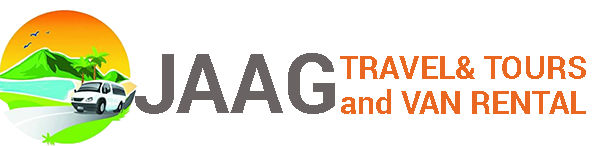
<style>
.page{position:relative;width:600px;height:146px;background:#ffffff}
.page>*{position:absolute;margin:0}
.t1{font:83.3px "Roboto-Bold";color:#696363}
.t2{font:32.3px "Roboto-Bold";color:#e96721}
</style>
<div class="page">
<p class="t1" style="left:135px;top:53px;width:200px;height:61px">JAAG</p>
<p class="t2" style="left:340px;top:56px;width:246px;height:23px">TRAVEL&amp; TOURS</p>
<p class="t2" style="left:341px;top:89px;width:245px;height:25px">and VAN RENTAL</p>
</div>
